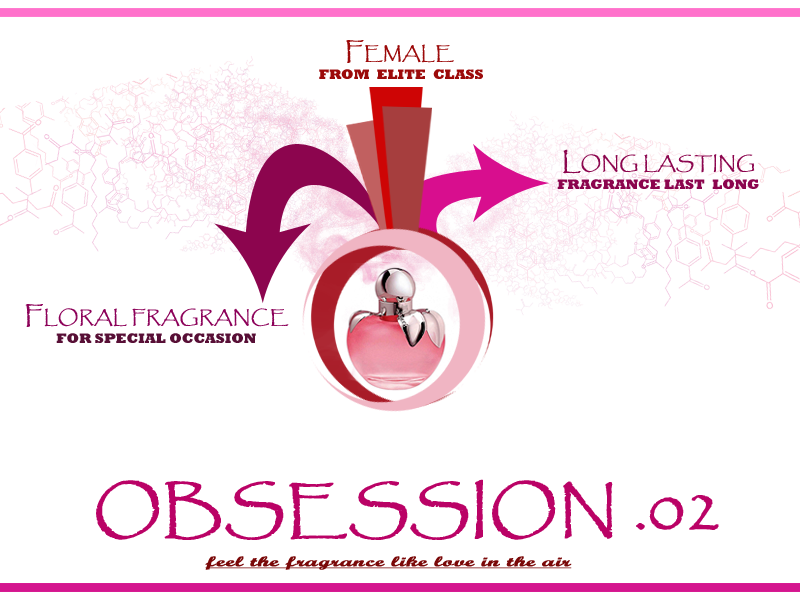
<style>
.page{position:relative;width:800px;height:600px;background:#ffffff}
.page>*{position:absolute;margin:0}
.t1{font:14px/20px "Rockwell-ExtraBold";color:#9c0a0a;text-transform:uppercase;scale:1.03 1}
.t2{font:24px/30px "Papyrus-Regular";color:#9c0a0a;text-transform:uppercase;font-weight:bold;scale:1.03 1}
.t3{font:18px/30px "Papyrus-Regular";color:#9c0a0a;text-transform:uppercase;font-weight:bold;scale:1.03 1}
.t4{font:14px/20px "Rockwell-ExtraBold";color:#8c054e;text-transform:uppercase;scale:1.03 1}
.t5{font:24px/30px "Papyrus-Regular";color:#8c054e;text-transform:uppercase;font-weight:bold;scale:1.03 1}
.t6{font:18px/30px "Papyrus-Regular";color:#8c054e;text-transform:uppercase;font-weight:bold;scale:1.03 1}
.t7{font:14px/20px "Rockwell-ExtraBold";color:#580f36;text-transform:uppercase;scale:1.03 1}
.t8{font:24px/30px "Papyrus-Regular";color:#8c0159;text-transform:uppercase;font-weight:bold;scale:1.03 1}
.t9{font:18px/30px "Papyrus-Regular";color:#8c0159;text-transform:uppercase;font-weight:bold;scale:1.03 1}
.t10{font:60px "Papyrus-Regular";color:#ba0266;text-transform:uppercase;font-weight:bold;scale:1.03 1}
.t11{font:14px "ScriptMTBold";color:#7a0808;font-weight:bold;text-decoration:underline;scale:1.72 1}
</style>
<div class="page">
<p class="t1" style="left:319px;top:40px;width:164px;height:39px;text-align:center"><span class="t2">F</span><span class="t3">emale <br></span>from  elite  class</p>
<p class="t4" style="left:557px;top:149px;width:202px;height:40px;text-align:center"><span class="t5">L</span><span class="t6">ong Lasting<br></span>fragrance last  long</p>
<p class="t7" style="left:25px;top:304px;width:264px;height:39px;text-align:center"><span class="t8">f</span><span class="t9">loral Fragrance<br></span>for special Occasion</p>
<p class="t10" style="left:96px;top:479px;width:623px;height:61px">obsession .02</p>
<p class="t11" style="left:205px;top:556px;width:367px;height:14px">feel the fragrance like love in the air</p>
</div>
